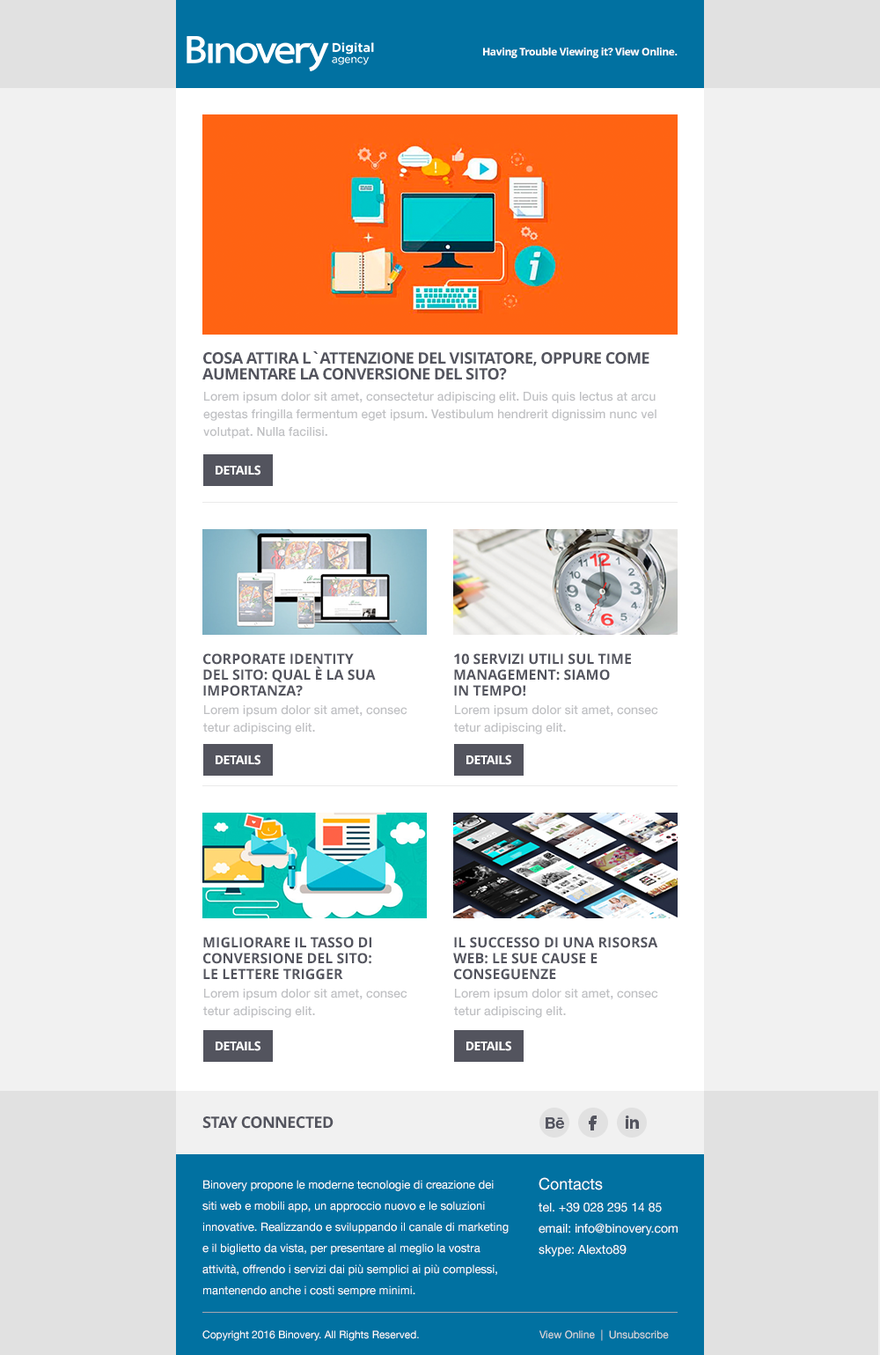
<style>
.page{position:relative;width:880px;height:1355px;background:#f1f1f1}
.page>*{position:absolute;margin:0}
.t1{font:10.6px "OpenSans-Bold";letter-spacing:-0.03em;color:#ffffff}
.t2{font:15.8px/15.8px "OpenSans-Bold";letter-spacing:-0.03em;color:#53545e;text-transform:uppercase}
.t3{font:12.3px/17.6px "HelveticaNeue-Medium";color:#bfc0c3}
.t4{font:12.3px "OpenSans-Bold";letter-spacing:-0.03em;color:#ffffff;text-transform:uppercase}
.t5{font:14.1px/15.8px "OpenSans-Bold";color:#53545e;text-transform:uppercase}
.t6{font:15.8px "OpenSans-Bold";letter-spacing:-0.03em;color:#53545e;text-transform:uppercase}
.t7{font:11.4px/21.1px "HelveticaNeue";color:#ffffff}
.t8{font:15.8px "HelveticaNeue";color:#ffffff}
.t9{font:12.3px/21.1px "HelveticaNeue";color:#ffffff}
.t10{font:10.6px "HelveticaNeue";color:#ffffff}
.t11{font:10.6px "HelveticaNeue";color:#dddddd}
</style>
<div class="page">
<p class="t1" style="left:483px;top:48px;width:195px;height:10px">Having Trouble Viewing it? View Online.</p>
<p class="t2" style="left:202px;top:351px;width:448px;height:29px">Cosa attira l`attenzione del visitatore, oppure come <br>aumentare la conversione del sito?</p>
<p class="t3" style="left:203px;top:392px;width:454px;height:46px">Lorem ipsum dolor sit amet, consectetur adipiscing elit. Duis quis lectus at arcu egestas fringilla fermentum eget ipsum. Vestibulum hendrerit dignissim nunc vel volutpat. Nulla facilisi.</p>
<p class="t4" style="left:216px;top:465px;width:45px;height:10px">Details</p>
<p class="t5" style="left:203px;top:653px;width:173px;height:43px">Corporate Identity <br>del sito: qual è la sua<br>importanza?</p>
<p class="t5" style="left:454px;top:653px;width:177px;height:43px">10 servizi utili sul time<br>management: siamo<br>in tempo!</p>
<p class="t3" style="left:203px;top:705px;width:205px;height:29px">Lorem ipsum dolor sit amet, consec tetur adipiscing elit.</p>
<p class="t3" style="left:454px;top:705px;width:204px;height:29px">Lorem ipsum dolor sit amet, consec tetur adipiscing elit.</p>
<p class="t4" style="left:216px;top:754px;width:45px;height:11px">Details</p>
<p class="t4" style="left:467px;top:754px;width:44px;height:11px">Details</p>
<p class="t5" style="left:203px;top:937px;width:168px;height:43px">Migliorare il tasso di<br>conversione del sito: <br>le lettere trigger</p>
<p class="t5" style="left:453px;top:937px;width:205px;height:43px">Il successo di una risorsa <br>web: le sue cause e <br>conseguenze</p>
<p class="t3" style="left:203px;top:989px;width:205px;height:29px">Lorem ipsum dolor sit amet, consec tetur adipiscing elit.</p>
<p class="t3" style="left:454px;top:989px;width:204px;height:29px">Lorem ipsum dolor sit amet, consec tetur adipiscing elit.</p>
<p class="t4" style="left:216px;top:1040px;width:45px;height:11px">Details</p>
<p class="t4" style="left:467px;top:1040px;width:44px;height:11px">Details</p>
<p class="t6" style="left:202px;top:1116px;width:132px;height:12px">Stay Connected</p>
<p class="t7" style="left:202px;top:1180px;width:307px;height:117px">Binovery propone le moderne tecnologie di creazione dei siti web e mobili app, un approccio nuovo e le soluzioni innovative. Realizzando e sviluppando il canale di marketing e il biglietto da vista, per presentare al meglio la vostra attività, offrendo i servizi dai più semplici ai più complessi, mantenendo anche i costi sempre minimi.</p>
<p class="t8" style="left:539px;top:1177px;width:64px;height:13px">Contacts</p>
<p class="t9" style="left:539px;top:1202px;width:139px;height:54px">tel. +39 028 295 14 85<br>email: info@binovery.com<br>skype: Alexto89</p>
<p class="t10" style="left:202px;top:1330px;width:217px;height:11px">Copyright 2016 Binovery. All Rights Reserved.</p>
<p class="t11" style="left:540px;top:1329px;width:129px;height:12px">View Online  |  Unsubscribe</p>
</div>
